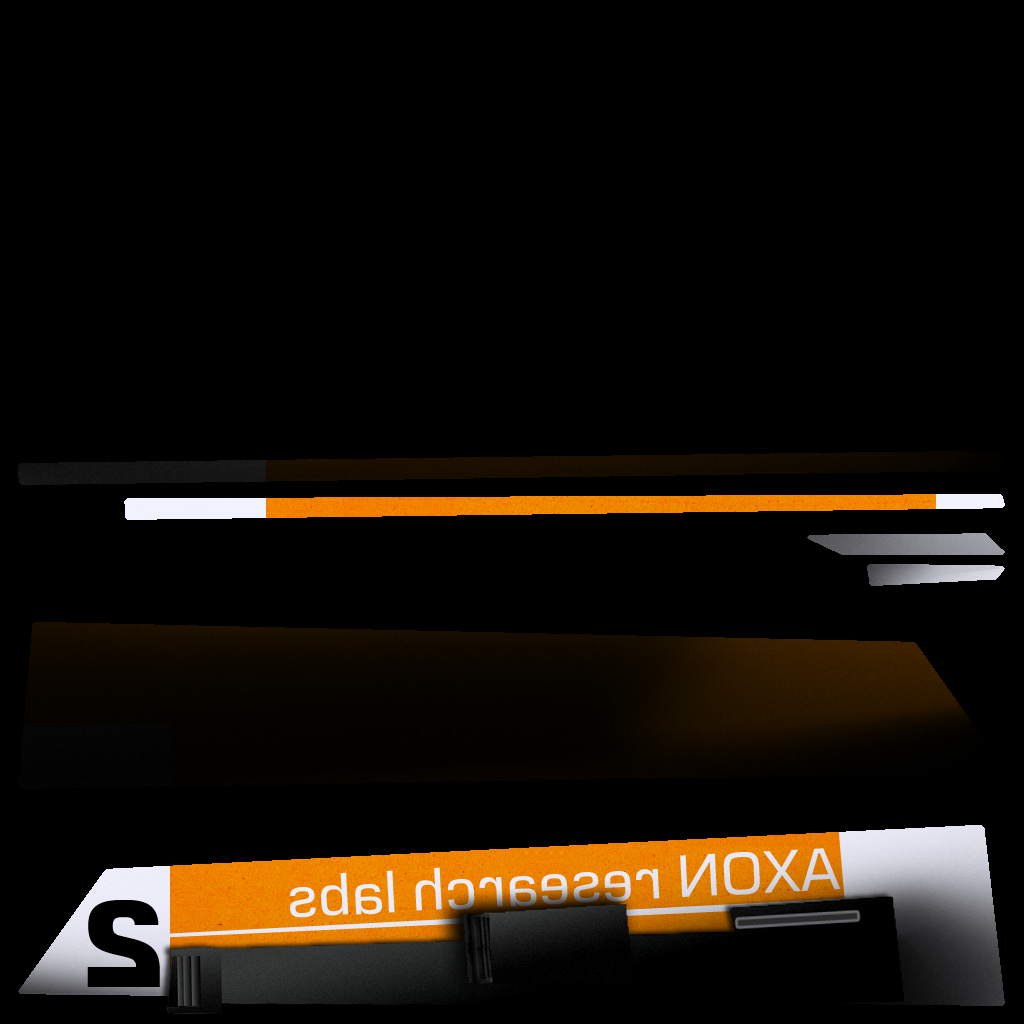
<style>
.page{position:relative;width:1024px;height:1024px;background:#000000}
.page>*{position:absolute;margin:0}
.t1{font:57px "Moire";color:#e6e6f2;scale:0.96 1}
.t2{font:119px "Moire-ExtraBold";color:#000000;scale:0.96 1}
</style>
<div class="page">
<p class="t1" style="left:290px;top:848px;width:551px;height:70px;rotate:177deg">AXON research labs</p>
<p class="t2" style="left:87px;top:900px;width:73px;height:87px;rotate:180deg">2</p>
</div>
